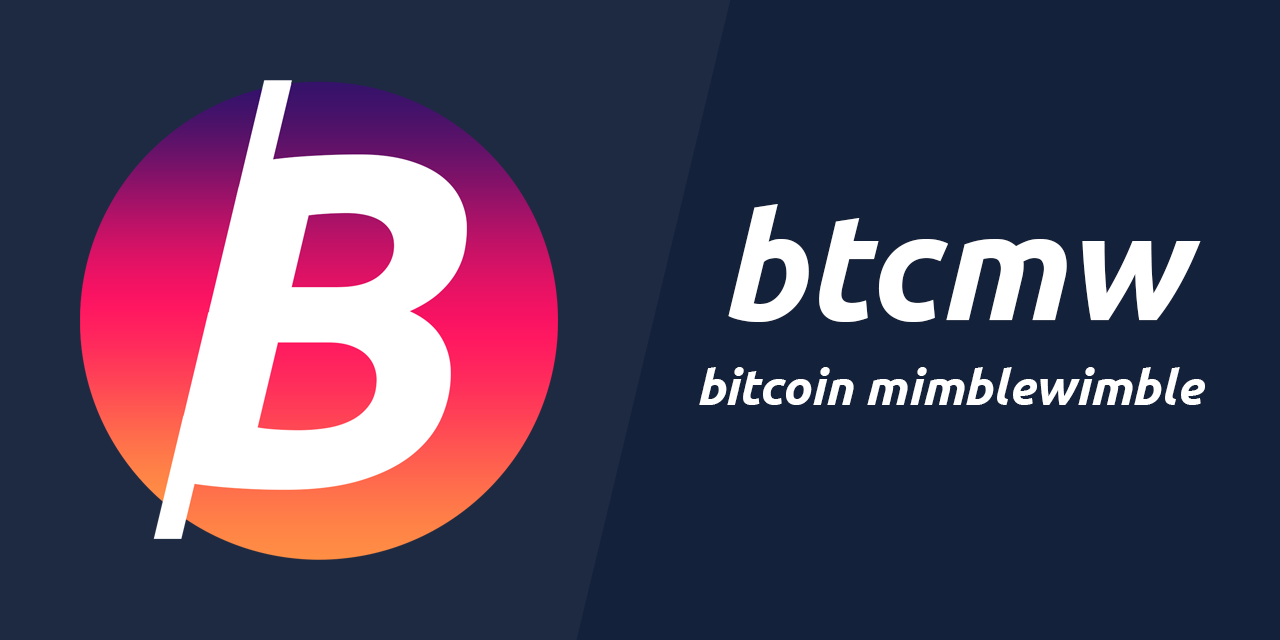
<style>
.page{position:relative;width:1280px;height:640px;background:#14213a}
.page>*{position:absolute;margin:0}
.t1{font:150px "Ubuntu-BoldItalic";color:#ffffff}
.t2{font:50px "Ubuntu-BoldItalic";color:#ffffff}
</style>
<div class="page">
<p class="t1" style="left:728px;top:204px;width:473px;height:118px">btcmw</p>
<p class="t2" style="left:699px;top:367px;width:506px;height:38px">bitcoin mimblewimble</p>
</div>
